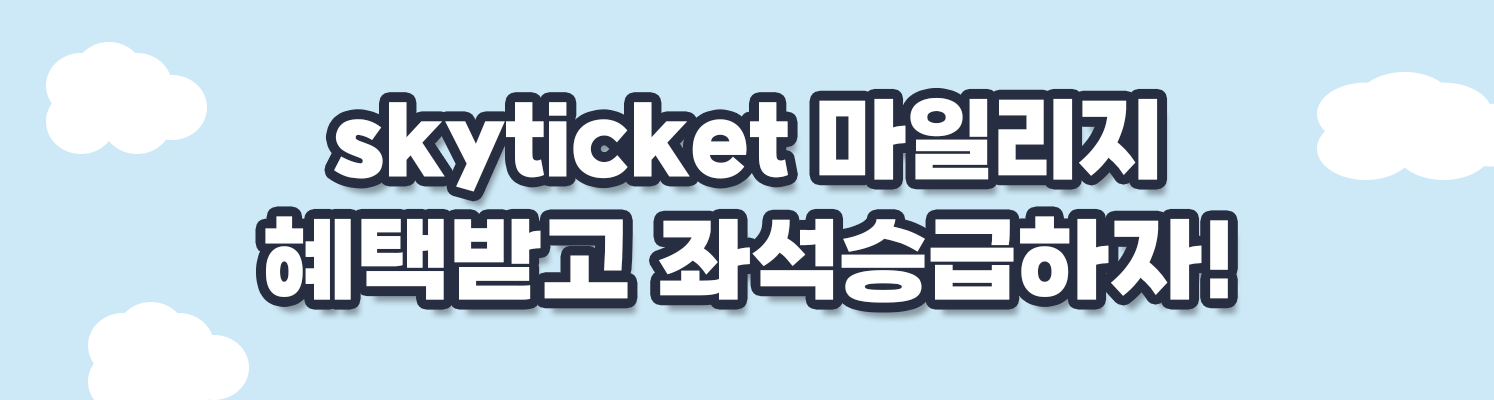
<style>
.page{position:relative;width:1494px;height:400px;background:#cde9f7}
.page>*{position:absolute;margin:0}
.t1{font:100px "GangwonEduPowerExtraBold";color:#ffffff}
</style>
<div class="page">
<p class="t1" style="left:265px;top:97px;width:963px;height:206px;text-align:center">skyticket 마일리지 <br>혜택받고 좌석승급하자!</p>
</div>
